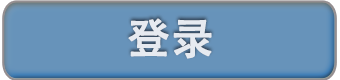
<style>
.page{position:relative;width:340px;height:80px;background:#6793ba}
.page>*{position:absolute;margin:0}
.t1{font:42.7px "AdobeHeitiStd-Regular";color:#e6eaf0;font-weight:bold}
</style>
<div class="page">
<p class="t1" style="left:128px;top:18px;width:84px;height:41px">登录</p>
</div>
